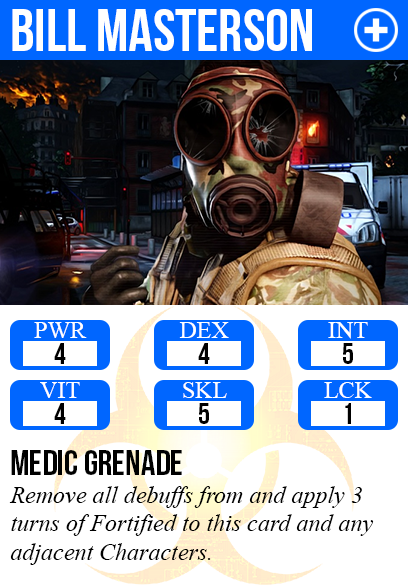
<style>
.page{position:relative;width:408px;height:585px;background:#ffffff}
.page>*{position:absolute;margin:0}
.t1{font:60px "BebasNeue";color:#ffffff}
.t2{font:24px "TimesNewRomanPSMT";color:#ffffff}
.t3{font:30px "BebasNeue";color:#000000}
.t4{font:36px "BebasNeue";color:#000000}
.t5{font:24px "TimesNewRomanPS-ItalicMT";color:#000000}
</style>
<div class="page">
<p class="t1" style="left:12px;top:9px;width:300px;height:42px">bill masterson</p>
<p class="t2" style="left:34px;top:322px;width:53px;height:16px">PWR</p>
<p class="t2" style="left:179px;top:322px;width:50px;height:16px">DEX</p>
<p class="t2" style="left:328px;top:322px;width:40px;height:17px">INT</p>
<p class="t3" style="left:54px;top:343px;width:12px;height:21px">4</p>
<p class="t3" style="left:198px;top:343px;width:12px;height:21px">4</p>
<p class="t3" style="left:343px;top:343px;width:10px;height:21px">5</p>
<p class="t2" style="left:40px;top:382px;width:40px;height:16px">VIT</p>
<p class="t2" style="left:183px;top:382px;width:44px;height:16px">SKL</p>
<p class="t2" style="left:324px;top:382px;width:48px;height:16px">LCK</p>
<p class="t3" style="left:54px;top:403px;width:12px;height:21px">4</p>
<p class="t3" style="left:199px;top:403px;width:10px;height:21px">5</p>
<p class="t3" style="left:345px;top:403px;width:6px;height:21px">1</p>
<p class="t4" style="left:11px;top:450px;width:171px;height:25px">medic grenade</p>
<p class="t5" style="left:9px;top:486px;width:365px;height:79px">Remove all debuffs from and apply 3<br>turns of Fortified to this card and any<br>adjacent Characters.</p>
</div>
